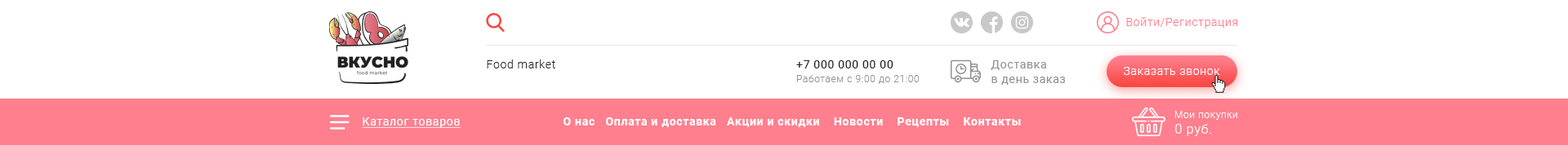
<style>
.page{position:relative;width:1568px;height:145px;background:#ffffff}
.page>*{position:absolute;margin:0}
.t1{font:11.4px "Roboto-Light";letter-spacing:0.05em;color:#ff7f8e}
.t2{font:11.4px "Roboto-Light";letter-spacing:0.05em;color:#212121}
.t3{font:11.4px "Roboto-Regular";letter-spacing:0.05em;color:#212121}
.t4{font:11.4px/14.7px "Roboto-Regular";letter-spacing:0.05em;color:#929292}
.t5{font:9.8px "Roboto-Light";letter-spacing:0.05em;color:#929292}
.t6{font:11.4px "Roboto-Light";letter-spacing:0.05em;color:#ffffff}
.t7{font:9.8px "Roboto-Light";letter-spacing:0.05em;color:#ffffff}
.t8{font:11.4px "Roboto-Regular";letter-spacing:0.05em;color:#ffffff;text-decoration:underline}
.t9{font:11.4px "Roboto-Bold";letter-spacing:0.05em;color:#ffffff}
.t10{font:13.1px "Roboto-Light";letter-spacing:0.05em;color:#ffffff}
</style>
<div class="page">
<p class="t1" style="left:1126px;top:17px;width:112px;height:12px">Войти/Регистрация</p>
<p class="t2" style="left:487px;top:60px;width:68px;height:9px">Food market</p>
<p class="t3" style="left:796px;top:60px;width:97px;height:9px">+7 000 000 00 00</p>
<p class="t4" style="left:991px;top:60px;width:74px;height:25px">Доставка <br>в день заказ</p>
<p class="t5" style="left:796px;top:75px;width:124px;height:9px">Работаем с 9:00 до 21:00</p>
<p class="t6" style="left:1124px;top:67px;width:96px;height:8px">Заказать звонок</p>
<p class="t7" style="left:1175px;top:111px;width:62px;height:9px">Мои покупки</p>
<p class="t8" style="left:362px;top:118px;width:99px;height:10px">Каталог товаров</p>
<p class="t9" style="left:564px;top:118px;width:457px;height:9px">О нас   Оплата и доставка   Акции и скидки    Новости    Рецепты    Контакты</p>
<p class="t10" style="left:1175px;top:124px;width:37px;height:12px">0 руб.</p>
</div>
